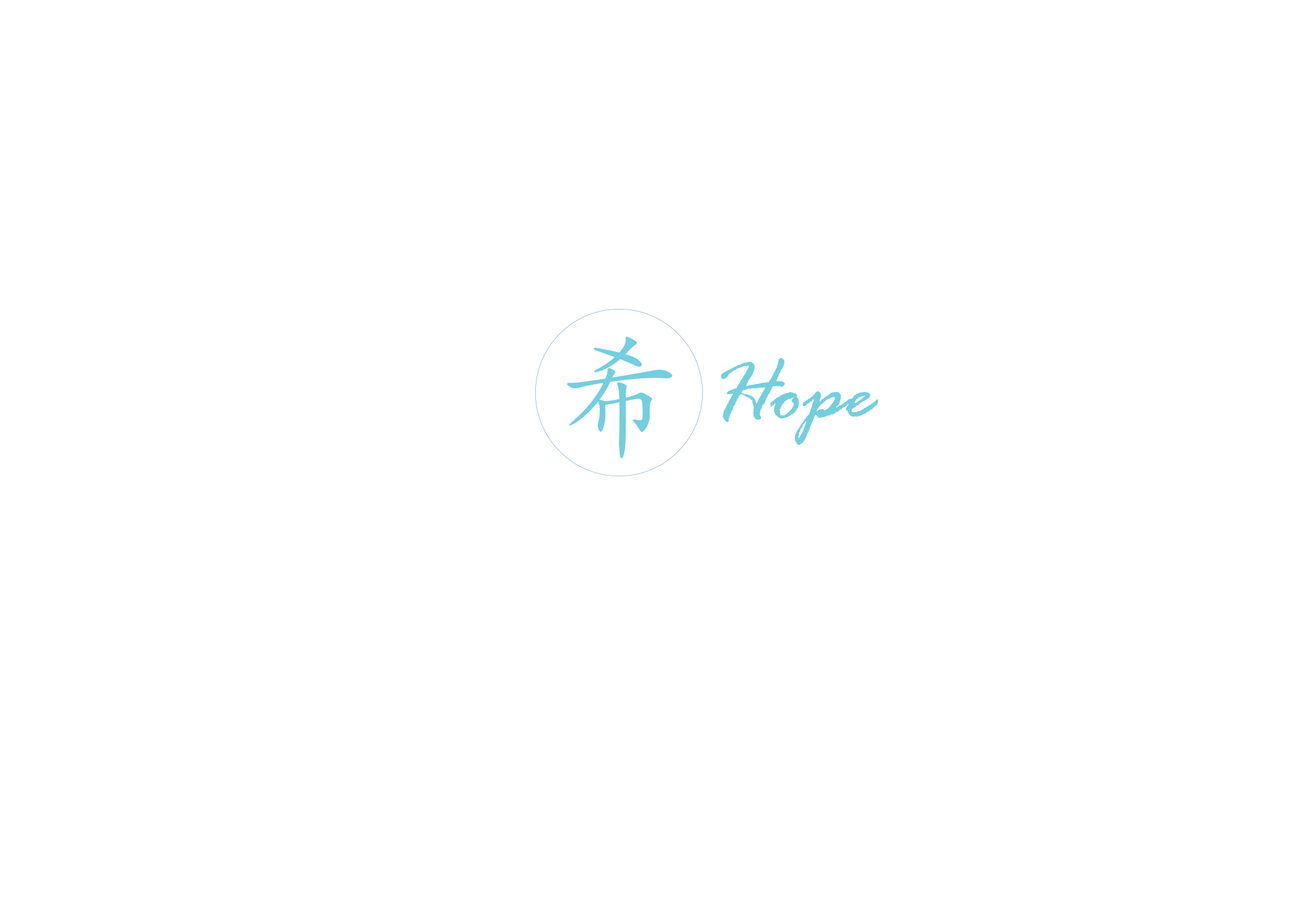
<style>
.page{position:relative;width:1292px;height:923px;background:#ffffff}
.page>*{position:absolute;margin:0}
.t1{font:127.9px "AdobeKaitiStd-Regular";color:#73cede}
.t2{font:89.4px "RageItalic";color:#73cede}
</style>
<div class="page">
<p class="t1" style="left:567px;top:337px;width:105px;height:121px">希</p>
<p class="t2" style="left:720px;top:358px;width:159px;height:87px">Hope</p>
</div>
